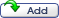
<style>
.page{position:relative;width:59px;height:18px;background:#ffffff}
.page>*{position:absolute;margin:0}
.t1{font:9.4px "Decker-Bold";letter-spacing:0.025em;color:#37456b;scale:1.11 1}
</style>
<div class="page">
<p class="t1" style="left:27px;top:7px;width:21px;height:7px">Add</p>
</div>
